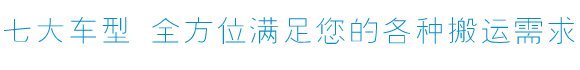
<style>
.page{position:relative;width:580px;height:70px;background:#ffffff}
.page>*{position:absolute;margin:0}
.t1{font:30px "FZYXK--GBK1-0";letter-spacing:0.1em;color:#008cd6}
.t2{font:30px "FZYXJW--GB1-0";letter-spacing:0.1em;color:#008cd6}
</style>
<div class="page">
<p class="t1" style="left:4px;top:17px;width:571px;height:27px">七大<span class="t2">车</span>型 全方位<span class="t2">满</span>足您的各种搬<span class="t2">运</span>需求</p>
</div>
